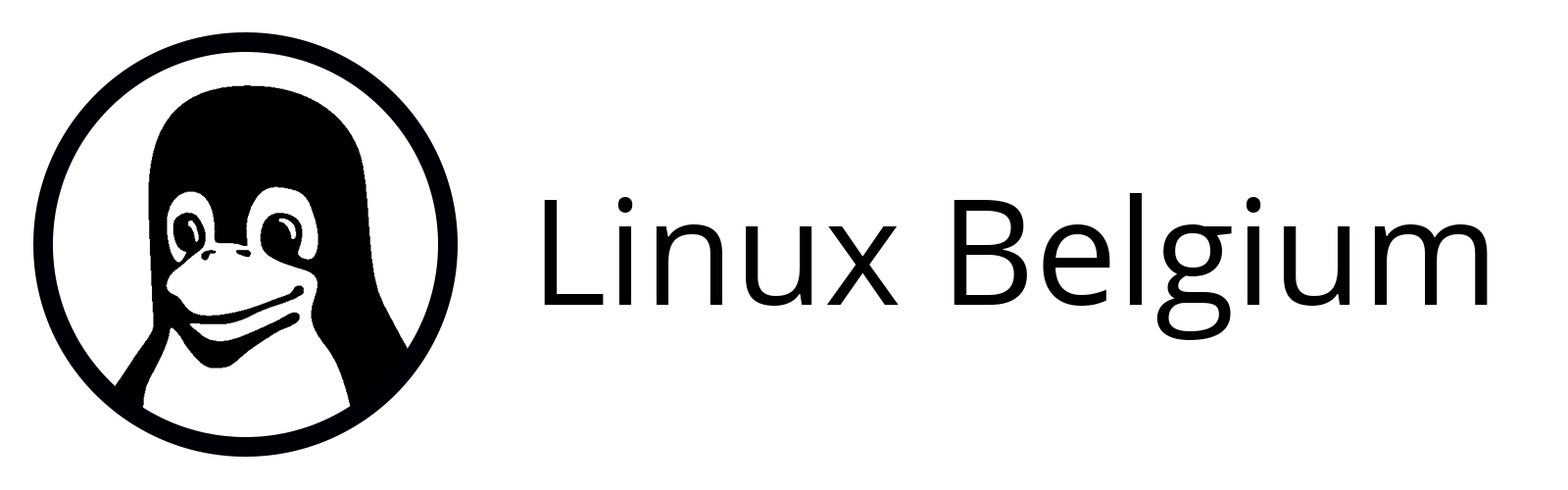
<style>
.page{position:relative;width:1568px;height:490px;background:#ffffff}
.page>*{position:absolute;margin:0}
.t1{font:147px "OpenSans";color:#000000}
</style>
<div class="page">
<p class="t1" style="left:544px;top:193px;width:944px;height:147px">Linux Belgium</p>
</div>
